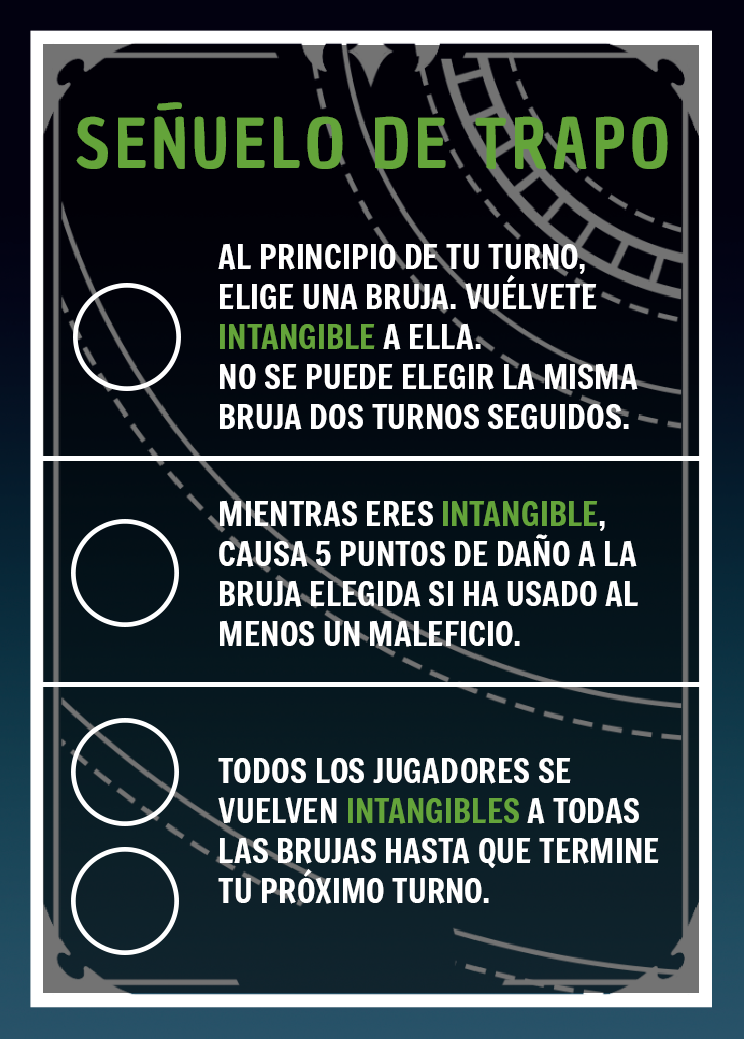
<style>
.page{position:relative;width:744px;height:1039px}
.page>*{position:absolute;margin:0}
.t1{font:66.7px "ChauPhilomeneOne-Regular";letter-spacing:0.075em;color:#64a43a}
.t2{font:33.3px "Freeman-Regular";color:#ffffff}
.t3{font:33.3px "Freeman-Regular";color:#64a43a}
</style>
<div class="page">
<p class="t1" style="left:76px;top:102px;width:592px;height:67px">SEÑUELO DE TRAPO</p>
<p class="t2" style="left:218px;top:243px;width:420px;height:187px">AL PRINCIPIO DE TU TURNO, ELIGE UNA BRUJA. VUÉLVETE <span class="t3">INTANGIBLE </span>A ELLA. <br>NO SE PUEDE ELEGIR LA MISMA <br>BRUJA DOS TURNOS SEGUIDOS.</p>
<p class="t2" style="left:219px;top:500px;width:419px;height:147px">MIENTRAS ERES <span class="t3">INTANGIBLE</span>, CAUSA 5 PUNTOS DE DAÑO A LA BRUJA ELEGIDA SI HA USADO AL MENOS UN MALEFICIO.</p>
<p class="t2" style="left:218px;top:757px;width:441px;height:147px">TODOS LOS JUGADORES SE VUELVEN <span class="t3">INTANGIBLES </span>A TODAS LAS BRUJAS HASTA QUE TERMINE TU PRÓXIMO TURNO.</p>
</div>
